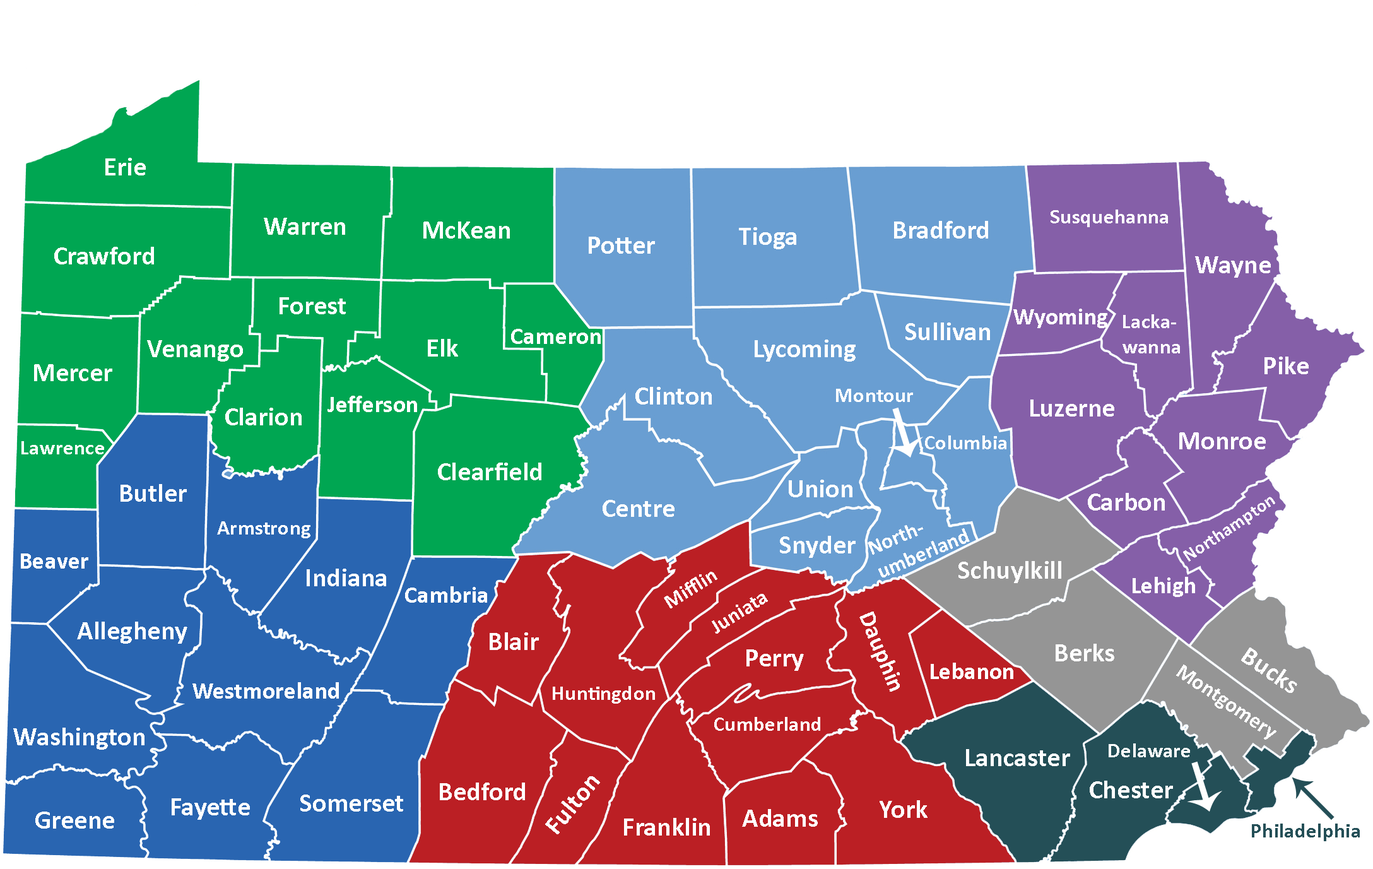
<style>
.page{position:relative;width:1373px;height:869px;background:#ffffff}
.page>*{position:absolute;margin:0}
.t1{font:26.3px "Calibri-Bold";letter-spacing:0.01em;color:#ffffff}
.t2{font:21px "Calibri-Bold";letter-spacing:0.01em;color:#ffffff}
.t3{font:23.7px "Calibri-Bold";letter-spacing:0.01em;color:#ffffff}
.t4{font:18.4px "Calibri-Bold";letter-spacing:0.01em;color:#ffffff}
.t5{font:21px "Calibri-Bold";letter-spacing:0.01em;color:#244f57}
</style>
<div class="page">
<p class="t1" style="left:105px;top:158px;width:41px;height:17px">Erie</p>
<p class="t2" style="left:1050px;top:209px;width:118px;height:18px">Susquehanna</p>
<p class="t1" style="left:264px;top:218px;width:81px;height:17px">Warren</p>
<p class="t1" style="left:423px;top:221px;width:87px;height:17px">McKean</p>
<p class="t1" style="left:894px;top:221px;width:94px;height:17px">Bradford</p>
<p class="t1" style="left:739px;top:227px;width:57px;height:22px">Tioga</p>
<p class="t1" style="left:589px;top:237px;width:66px;height:17px">Potter</p>
<p class="t1" style="left:54px;top:247px;width:100px;height:17px">Crawford</p>
<p class="t1" style="left:1195px;top:256px;width:76px;height:22px">Wayne</p>
<p class="t1" style="left:279px;top:297px;width:67px;height:17px">Forest</p>
<p class="t3" style="left:1013px;top:308px;width:94px;height:20px">Wyoming</p>
<p class="t2" style="left:1122px;top:314px;width:58px;height:39px">Lacka-<br>wanna</p>
<p class="t3" style="left:511px;top:329px;width:90px;height:15px">Cameron</p>
<p class="t1" style="left:905px;top:322px;width:85px;height:18px">Sullivan</p>
<p class="t1" style="left:147px;top:340px;width:96px;height:21px">Venango</p>
<p class="t1" style="left:428px;top:339px;width:30px;height:17px">Elk</p>
<p class="t1" style="left:754px;top:339px;width:101px;height:22px">Lycoming</p>
<p class="t1" style="left:34px;top:364px;width:78px;height:17px">Mercer</p>
<p class="t1" style="left:1264px;top:356px;width:44px;height:18px">Pike</p>
<p class="t1" style="left:635px;top:387px;width:77px;height:17px">Clinton</p>
<p class="t2" style="left:836px;top:389px;width:77px;height:13px">Montour</p>
<p class="t3" style="left:327px;top:396px;width:90px;height:16px">Jefferson</p>
<p class="t1" style="left:1030px;top:399px;width:84px;height:17px">Luzerne</p>
<p class="t1" style="left:225px;top:408px;width:77px;height:17px">Clarion</p>
<p class="t2" style="left:925px;top:435px;width:81px;height:14px">Columbia</p>
<p class="t1" style="left:1179px;top:432px;width:86px;height:17px">Monroe</p>
<p class="t2" style="left:21px;top:441px;width:83px;height:13px">Lawrence</p>
<p class="t1" style="left:438px;top:462px;width:103px;height:18px">Clearfield</p>
<p class="t1" style="left:120px;top:484px;width:67px;height:18px">Butler</p>
<p class="t1" style="left:789px;top:479px;width:63px;height:18px">Union</p>
<p class="t1" style="left:1088px;top:493px;width:77px;height:17px">Carbon</p>
<p class="t4" style="left:1183px;top:496px;width:92px;height:65px;rotate:-34deg">Northampton</p>
<p class="t1" style="left:602px;top:500px;width:72px;height:17px">Centre</p>
<p class="t2" style="left:217px;top:521px;width:93px;height:17px">Armstrong</p>
<p class="t2" style="left:867px;top:525px;width:103px;height:52px;rotate:-23deg">North-<br>umberland</p>
<p class="t1" style="left:780px;top:536px;width:75px;height:22px">Snyder</p>
<p class="t3" style="left:21px;top:553px;width:67px;height:15px">Beaver</p>
<p class="t1" style="left:307px;top:568px;width:79px;height:18px">Indiana</p>
<p class="t1" style="left:958px;top:561px;width:103px;height:22px">Schuylkill</p>
<p class="t2" style="left:664px;top:572px;width:53px;height:36px;rotate:-32deg">Mifflin</p>
<p class="t3" style="left:1132px;top:577px;width:63px;height:20px">Lehigh</p>
<p class="t3" style="left:405px;top:586px;width:82px;height:16px">Cambria</p>
<p class="t2" style="left:712px;top:594px;width:56px;height:39px;rotate:-32deg">Juniata</p>
<p class="t3" style="left:859px;top:611px;width:41px;height:80px;rotate:67deg">Dauphin</p>
<p class="t1" style="left:77px;top:621px;width:110px;height:22px">Allegheny</p>
<p class="t1" style="left:490px;top:632px;width:49px;height:18px">Blair</p>
<p class="t1" style="left:746px;top:649px;width:58px;height:22px">Perry</p>
<p class="t1" style="left:1055px;top:643px;width:59px;height:18px">Berks</p>
<p class="t1" style="left:1241px;top:647px;width:56px;height:46px;rotate:34deg">Bucks</p>
<p class="t3" style="left:930px;top:662px;width:83px;height:17px">Lebanon</p>
<p class="t2" style="left:1176px;top:664px;width:100px;height:75px;rotate:34deg">Montgomery</p>
<p class="t3" style="left:192px;top:682px;width:147px;height:16px">Westmoreland</p>
<p class="t2" style="left:553px;top:686px;width:102px;height:17px">Huntingdon</p>
<p class="t2" style="left:714px;top:717px;width:106px;height:14px">Cumberland</p>
<p class="t1" style="left:13px;top:727px;width:131px;height:22px">Washington</p>
<p class="t1" style="left:966px;top:749px;width:104px;height:17px">Lancaster</p>
<p class="t2" style="left:1108px;top:743px;width:82px;height:14px">Delaware</p>
<p class="t1" style="left:440px;top:782px;width:85px;height:18px">Bedford</p>
<p class="t1" style="left:545px;top:776px;width:55px;height:58px;rotate:-51deg">Fulton</p>
<p class="t1" style="left:1089px;top:780px;width:84px;height:18px">Chester</p>
<p class="t1" style="left:300px;top:794px;width:103px;height:17px">Somerset</p>
<p class="t1" style="left:172px;top:798px;width:78px;height:21px">Fayette</p>
<p class="t1" style="left:742px;top:809px;width:76px;height:17px">Adams</p>
<p class="t1" style="left:879px;top:800px;width:48px;height:18px">York</p>
<p class="t1" style="left:35px;top:811px;width:79px;height:17px">Greene</p>
<p class="t1" style="left:624px;top:818px;width:86px;height:17px">Franklin</p>
<p class="t5" style="left:1252px;top:823px;width:107px;height:18px">Philadelphia</p>
</div>
